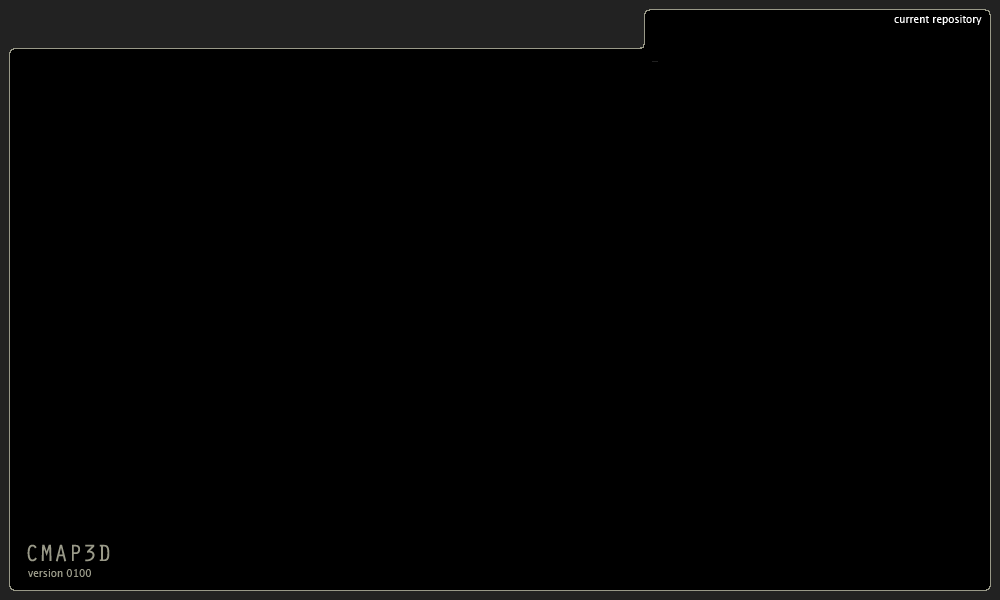
<style>
.page{position:relative;width:1000px;height:600px;background:#000000}
.page>*{position:absolute;margin:0}
.t1{font:10px "LucidaGrande";color:#ffffff}
.t2{font:24px "OratorStd";color:#999988}
.t3{font:10px "LucidaGrande";color:#999988}
</style>
<div class="page">
<p class="t1" style="left:894px;top:15px;width:88px;height:10px">current repository</p>
<p class="t2" style="left:27px;top:544px;width:83px;height:18px">CMAP3D</p>
<p class="t3" style="left:28px;top:569px;width:63px;height:8px">version 0100</p>
</div>
